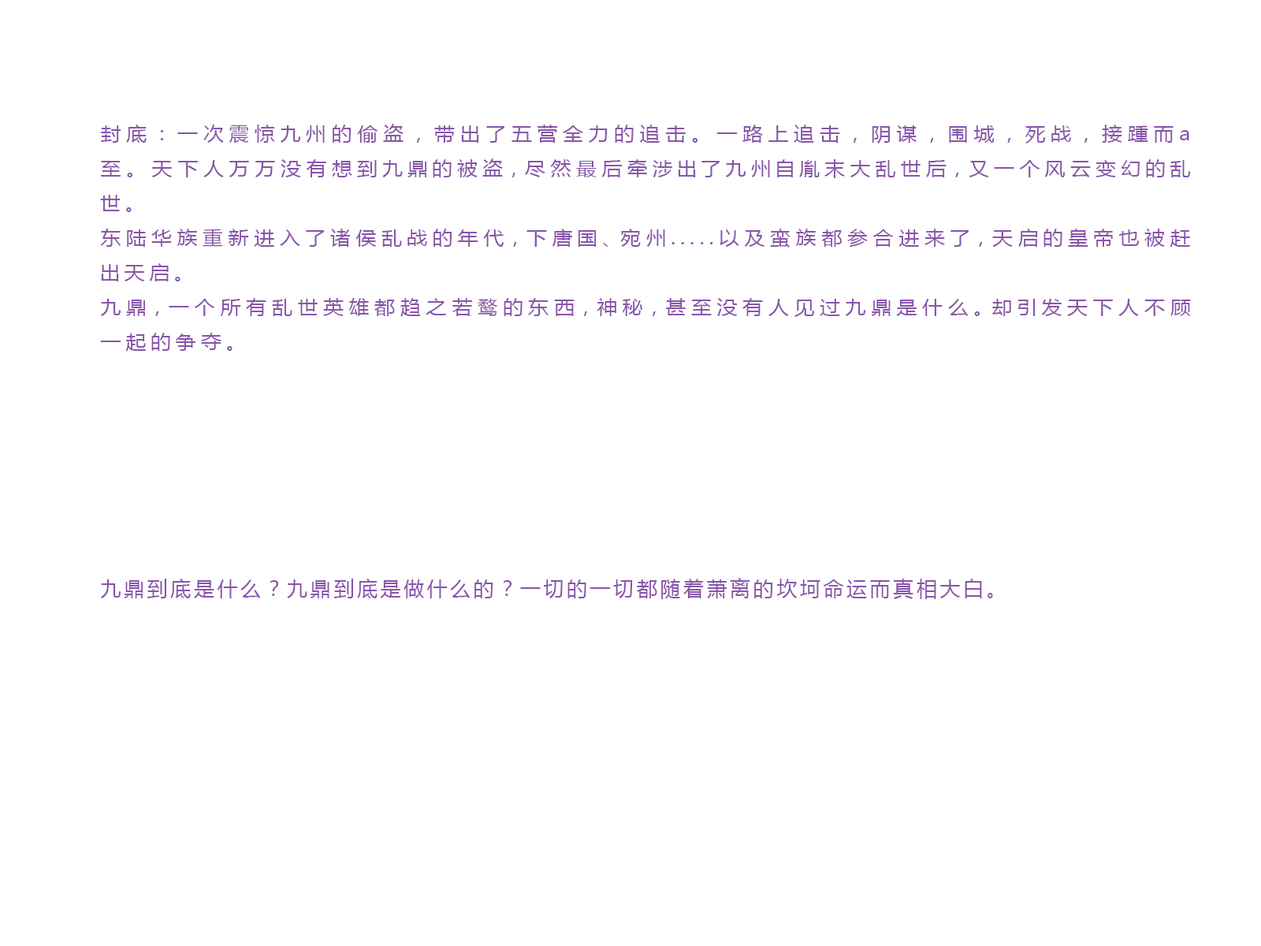
<style>
.page{position:relative;width:1261px;height:946px;background:#ffffff}
.page>*{position:absolute;margin:0}
.t1{font:18.9px/34.7px "MicrosoftYaHei";letter-spacing:0.275em;color:#8855aa;scale:1.06 1}
.t2{font:20.1px/247.5px "MicrosoftYaHei";letter-spacing:0.16em;color:#8855aa}
</style>
<div class="page">
<p class="t1" style="left:100px;top:124px;width:1091px;height:475px;text-align:justify">封底：一次震惊九州的偷盗，带出了五营全力的追击。一路上追击，阴谋，围城，死战，接踵而a至。天下人万万没有想到九鼎的被盗，尽然最后牵涉出了九州自胤末大乱世后，又一个风云变幻的乱世。<br>东陆华族重新进入了诸侯乱战的年代，下唐国、宛州.....以及蛮族都参合进来了，天启的皇帝也被赶出天启。 <br>九鼎，一个所有乱世英雄都趋之若鹜的东西，神秘，甚至没有人见过九鼎是什么。却引发天下人不顾一起的争夺。<br><span class="t2">九鼎到底是什么？九鼎到底是做什么的？一切的一切都随着萧离的坎坷命运而真相大白。</span></p>
</div>
